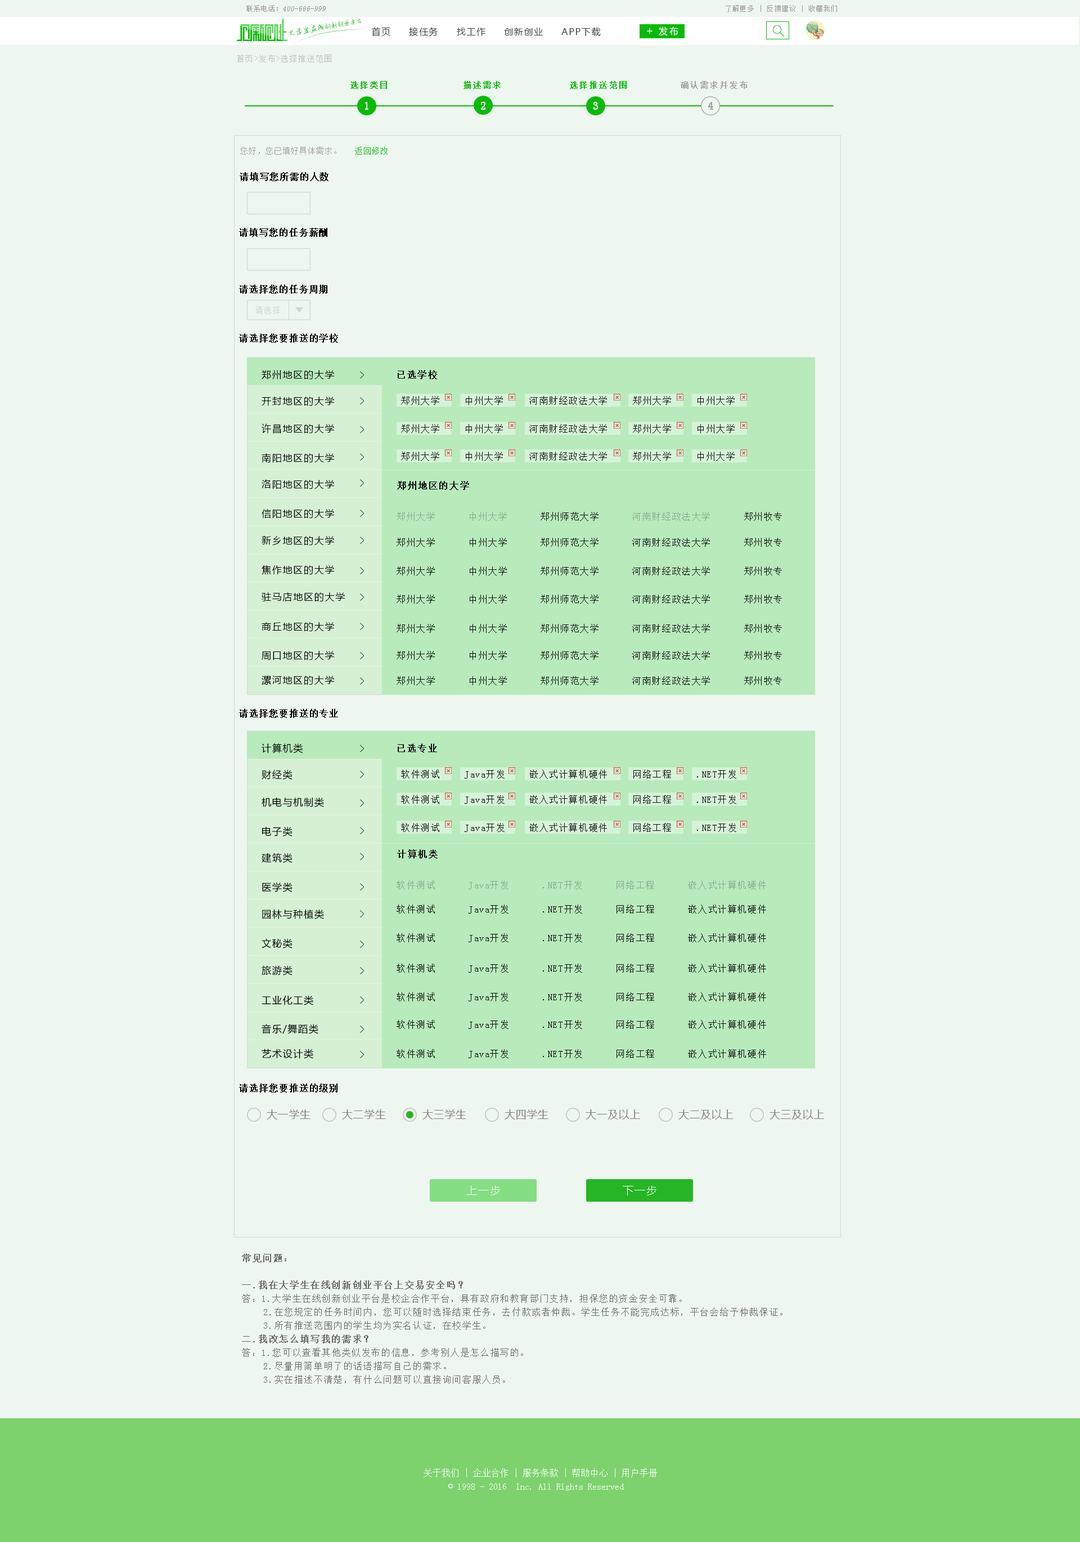
<style>
.page{position:relative;width:1080px;height:1542px;background:#eef6f0}
.page>*{position:absolute;margin:0}
.t1{font:7.5px "SimSun";color:#959595;font-style:italic}
.t2{font:7.5px "SimSun";color:#959595}
.t3{font:6.8px "SimSun";letter-spacing:0.1em;color:#959494}
.t4{font:7px "AnJingCheng-Xing-2.0";letter-spacing:-0.01em;color:#09ba08}
.t5{font:7.8px "AnJingCheng-Xing-2.0";letter-spacing:-0.01em;color:#09ba08}
.t6{font:9px "MicrosoftYaHei";letter-spacing:0.1em;color:#3e3e3e}
.t7{font:10.5px "MicrosoftYaHei";letter-spacing:0.2em;color:#ffffff}
.t8{font:9px "MicrosoftYaHei";letter-spacing:0.2em;color:#ffffff}
.t9{font:7.9px "SimSun";letter-spacing:0.1em;color:#bebebe}
.t10{font:8.3px "SimSun";letter-spacing:0.1em;color:#09ba08;font-weight:bold}
.t11{font:8.2px "SimSun";letter-spacing:0.1em;color:#09ba08;font-weight:bold}
.t12{font:8.2px "SimSun";letter-spacing:0.1em;color:#a2a2a2;font-weight:bold}
.t13{font:10.4px "SimSun";letter-spacing:0.1em;color:#ffffff;font-weight:bold}
.t14{font:10.6px "SimSun";letter-spacing:0.1em;color:#a2a2a2;font-weight:bold}
.t15{font:8.2px "SimSun";color:#a3a0a0}
.t16{font:8.2px "SimSun";color:#09ba08}
.t17{font:9px "SimSun";letter-spacing:0.05em;color:#000000;font-weight:bold}
.t18{font:8.2px "SimSun";letter-spacing:0.05em;color:#d0d5d1}
.t19{font:9.7px "MicrosoftYaHei";letter-spacing:0.1em;color:#000000}
.t20{font:9px "SimSun";letter-spacing:0.1em;color:#0b0b0b;font-weight:bold}
.t21{font:9px "SimSun";letter-spacing:0.1em;color:#0b0b0b}
.t22{font:9px "SimSun";letter-spacing:0.1em;color:#87a489}
.t23{font:10.5px "MicrosoftYaHei";letter-spacing:0.05em;color:#858080}
.t24{font:10.5px "MicrosoftYaHei";letter-spacing:0.1em;color:#ffffff}
.t25{font:9px/13.5px "SimSun";letter-spacing:0.1em;color:#696969}
.t26{font:9px/13.5px "SimSun";letter-spacing:0.1em;color:#696969;font-weight:bold}
.t27{font:9px/13.5px "SimSun";color:#ffffff}
</style>
<div class="page">
<p class="t1" style="left:246px;top:5px;width:80px;height:7px"><span class="t2">联系电话：</span>400-666-999</p>
<p class="t3" style="left:726px;top:5px;width:111px;height:7px">了解更多 | 反馈建议 | 收藏我们</p>
<p class="t4" style="left:289px;top:17px;width:73px;height:18px;rotate:-10deg"><span class="t5">大学生在线</span>创新创业平台</p>
<p class="t6" style="left:371px;top:27px;width:230px;height:10px">首页     接任务     找工作     创新创业     APP下载</p>
<p class="t7" style="left:647px;top:28px;width:6px;height:6px">+</p>
<p class="t8" style="left:659px;top:26px;width:19px;height:9px">发布</p>
<p class="t9" style="left:237px;top:55px;width:94px;height:7px">首页&gt;发布&gt;选择推送范围</p>
<p class="t10" style="left:350px;top:81px;width:37px;height:8px">选择类目</p>
<p class="t10" style="left:464px;top:81px;width:37px;height:8px">描述需求</p>
<p class="t11" style="left:570px;top:81px;width:57px;height:8px">选择推送范围</p>
<p class="t12" style="left:681px;top:81px;width:67px;height:8px">确认需求并发布</p>
<p class="t13" style="left:365px;top:102px;width:3px;height:8px">1</p>
<p class="t13" style="left:481px;top:102px;width:5px;height:8px">2</p>
<p class="t13" style="left:594px;top:102px;width:4px;height:8px">3</p>
<p class="t14" style="left:708px;top:102px;width:5px;height:8px">4</p>
<p class="t15" style="left:240px;top:147px;width:148px;height:8px">您好，您已填好具体需求。   <span class="t16">返回修改</span></p>
<p class="t17" style="left:240px;top:172px;width:89px;height:9px">请填写您所需的人数</p>
<p class="t17" style="left:239px;top:228px;width:88px;height:9px">请填写您的任务薪酬</p>
<p class="t17" style="left:239px;top:285px;width:88px;height:9px">请选择您的任务周期</p>
<p class="t18" style="left:255px;top:306px;width:25px;height:8px">请选择</p>
<p class="t17" style="left:239px;top:334px;width:99px;height:9px">请选择您要推送的学校</p>
<p class="t19" style="left:262px;top:370px;width:73px;height:9px">郑州地区的大学</p>
<p class="t20" style="left:398px;top:370px;width:39px;height:9px">已选学校</p>
<p class="t19" style="left:262px;top:397px;width:73px;height:9px">开封地区的大学</p>
<p class="t21" style="left:401px;top:396px;width:38px;height:9px">郑州大学</p>
<p class="t21" style="left:466px;top:396px;width:37px;height:9px">中州大学</p>
<p class="t21" style="left:529px;top:396px;width:78px;height:9px">河南财经政法大学</p>
<p class="t21" style="left:633px;top:396px;width:38px;height:9px">郑州大学</p>
<p class="t21" style="left:698px;top:396px;width:37px;height:9px">中州大学</p>
<p class="t19" style="left:262px;top:424px;width:73px;height:10px">许昌地区的大学</p>
<p class="t21" style="left:401px;top:424px;width:38px;height:9px">郑州大学</p>
<p class="t21" style="left:466px;top:424px;width:37px;height:9px">中州大学</p>
<p class="t21" style="left:529px;top:424px;width:78px;height:9px">河南财经政法大学</p>
<p class="t21" style="left:633px;top:424px;width:38px;height:9px">郑州大学</p>
<p class="t21" style="left:698px;top:424px;width:37px;height:9px">中州大学</p>
<p class="t19" style="left:262px;top:453px;width:73px;height:9px">南阳地区的大学</p>
<p class="t21" style="left:401px;top:452px;width:38px;height:9px">郑州大学</p>
<p class="t21" style="left:466px;top:452px;width:37px;height:9px">中州大学</p>
<p class="t21" style="left:529px;top:452px;width:78px;height:9px">河南财经政法大学</p>
<p class="t21" style="left:633px;top:452px;width:38px;height:9px">郑州大学</p>
<p class="t21" style="left:698px;top:452px;width:37px;height:9px">中州大学</p>
<p class="t19" style="left:262px;top:479px;width:73px;height:10px">洛阳地区的大学</p>
<p class="t20" style="left:397px;top:481px;width:72px;height:9px">郑州地区的大学</p>
<p class="t19" style="left:262px;top:509px;width:73px;height:9px">信阳地区的大学</p>
<p class="t22" style="left:397px;top:512px;width:385px;height:9px">郑州大学      中州大学<span class="t21">      郑州师范大学      </span>河南财经政法大学<span class="t21">      郑州牧专</span></p>
<p class="t19" style="left:262px;top:536px;width:73px;height:9px">新乡地区的大学</p>
<p class="t21" style="left:397px;top:538px;width:385px;height:9px">郑州大学      中州大学      郑州师范大学      河南财经政法大学      郑州牧专</p>
<p class="t19" style="left:262px;top:565px;width:73px;height:10px">焦作地区的大学</p>
<p class="t21" style="left:397px;top:567px;width:385px;height:9px">郑州大学      中州大学      郑州师范大学      河南财经政法大学      郑州牧专</p>
<p class="t19" style="left:262px;top:592px;width:83px;height:9px">驻马店地区的大学</p>
<p class="t21" style="left:397px;top:595px;width:385px;height:9px">郑州大学      中州大学      郑州师范大学      河南财经政法大学      郑州牧专</p>
<p class="t19" style="left:262px;top:622px;width:73px;height:9px">商丘地区的大学</p>
<p class="t21" style="left:397px;top:624px;width:385px;height:9px">郑州大学      中州大学      郑州师范大学      河南财经政法大学      郑州牧专</p>
<p class="t19" style="left:262px;top:651px;width:73px;height:9px">周口地区的大学</p>
<p class="t21" style="left:397px;top:651px;width:385px;height:9px">郑州大学      中州大学      郑州师范大学      河南财经政法大学      郑州牧专</p>
<p class="t19" style="left:262px;top:676px;width:73px;height:9px">漯河地区的大学</p>
<p class="t21" style="left:397px;top:676px;width:385px;height:9px">郑州大学      中州大学      郑州师范大学      河南财经政法大学      郑州牧专</p>
<p class="t17" style="left:239px;top:709px;width:99px;height:9px">请选择您要推送的专业</p>
<p class="t19" style="left:262px;top:743px;width:41px;height:10px">计算机类</p>
<p class="t20" style="left:398px;top:744px;width:39px;height:9px">已选专业</p>
<p class="t19" style="left:262px;top:770px;width:31px;height:10px">财经类</p>
<p class="t21" style="left:401px;top:770px;width:38px;height:9px">软件测试</p>
<p class="t21" style="left:465px;top:770px;width:40px;height:9px">Java开发</p>
<p class="t21" style="left:529px;top:770px;width:78px;height:9px">嵌入式计算机硬件</p>
<p class="t21" style="left:633px;top:770px;width:38px;height:9px">网络工程</p>
<p class="t21" style="left:697px;top:770px;width:39px;height:9px">.NET开发</p>
<p class="t19" style="left:262px;top:797px;width:62px;height:10px">机电与机制类</p>
<p class="t21" style="left:401px;top:795px;width:38px;height:9px">软件测试</p>
<p class="t21" style="left:465px;top:795px;width:40px;height:9px">Java开发</p>
<p class="t21" style="left:529px;top:795px;width:78px;height:9px">嵌入式计算机硬件</p>
<p class="t21" style="left:633px;top:795px;width:38px;height:9px">网络工程</p>
<p class="t21" style="left:697px;top:795px;width:39px;height:9px">.NET开发</p>
<p class="t19" style="left:262px;top:826px;width:31px;height:11px">电子类</p>
<p class="t21" style="left:401px;top:823px;width:38px;height:9px">软件测试</p>
<p class="t21" style="left:465px;top:823px;width:40px;height:9px">Java开发</p>
<p class="t21" style="left:529px;top:823px;width:78px;height:9px">嵌入式计算机硬件</p>
<p class="t21" style="left:633px;top:823px;width:38px;height:9px">网络工程</p>
<p class="t21" style="left:697px;top:823px;width:39px;height:9px">.NET开发</p>
<p class="t19" style="left:262px;top:853px;width:31px;height:10px">建筑类</p>
<p class="t20" style="left:397px;top:849px;width:41px;height:9px">计算机类</p>
<p class="t22" style="left:397px;top:880px;width:369px;height:9px">软件测试      Java开发      .NET开发      网络工程      嵌入式计算机硬件</p>
<p class="t19" style="left:262px;top:882px;width:31px;height:10px">医学类</p>
<p class="t21" style="left:397px;top:905px;width:369px;height:9px">软件测试      Java开发      .NET开发      网络工程      嵌入式计算机硬件</p>
<p class="t19" style="left:262px;top:909px;width:62px;height:10px">园林与种植类</p>
<p class="t19" style="left:262px;top:938px;width:31px;height:11px">文秘类</p>
<p class="t21" style="left:397px;top:933px;width:369px;height:9px">软件测试      Java开发      .NET开发      网络工程      嵌入式计算机硬件</p>
<p class="t19" style="left:262px;top:965px;width:31px;height:11px">旅游类</p>
<p class="t21" style="left:397px;top:964px;width:369px;height:9px">软件测试      Java开发      .NET开发      网络工程      嵌入式计算机硬件</p>
<p class="t19" style="left:262px;top:995px;width:51px;height:10px">工业化工类</p>
<p class="t21" style="left:397px;top:992px;width:369px;height:9px">软件测试      Java开发      .NET开发      网络工程      嵌入式计算机硬件</p>
<p class="t19" style="left:262px;top:1024px;width:56px;height:10px">音乐/舞蹈类</p>
<p class="t21" style="left:397px;top:1020px;width:369px;height:9px">软件测试      Java开发      .NET开发      网络工程      嵌入式计算机硬件</p>
<p class="t19" style="left:262px;top:1049px;width:51px;height:10px">艺术设计类</p>
<p class="t21" style="left:397px;top:1049px;width:369px;height:9px">软件测试      Java开发      .NET开发      网络工程      嵌入式计算机硬件</p>
<p class="t17" style="left:239px;top:1084px;width:99px;height:9px">请选择您要推送的级别</p>
<p class="t23" style="left:267px;top:1109px;width:44px;height:11px">大一学生</p>
<p class="t23" style="left:342px;top:1109px;width:44px;height:11px">大二学生</p>
<p class="t23" style="left:422px;top:1109px;width:44px;height:11px">大三学生</p>
<p class="t23" style="left:505px;top:1109px;width:44px;height:11px">大四学生</p>
<p class="t23" style="left:586px;top:1109px;width:55px;height:11px">大一及以上</p>
<p class="t23" style="left:678px;top:1109px;width:56px;height:11px">大二及以上</p>
<p class="t23" style="left:770px;top:1109px;width:55px;height:11px">大三及以上</p>
<p class="t24" style="left:466px;top:1185px;width:34px;height:10px">上一步</p>
<p class="t24" style="left:623px;top:1185px;width:34px;height:10px">下一步</p>
<p class="t25" style="left:242px;top:1253px;width:541px;height:131px"><span class="t26">常见问题：<br><br>一.我在大学生在线创新创业平台上交易安全吗？<br></span>答：1.大学生在线创新创业平台是校企合作平台，具有政府和教育部门支持，担保您的资金安全可靠。<br>    2.在您规定的任务时间内，您可以随时选择结束任务，去付款或者仲裁。学生任务不能完成达标，平台会给予仲裁保证。<br>    3.所有推送范围内的学生均为实名认证，在校学生。<br><span class="t26">二.我改怎么填写我的需求？<br></span>答：1.您可以查看其他类似发布的信息，参考别人是怎么描写的。<br>    2.尽量用简单明了的话语描写自己的需求。<br>    3.实在描述不清楚，有什么问题可以直接询问客服人员。</p>
<p class="t27" style="left:424px;top:1468px;width:233px;height:23px;text-align:center">关于我们 | 企业合作 | 服务条款 | 帮助中心 | 用户手册<br>© 1998 - 2016  Inc. All Rights Reserved</p>
</div>
